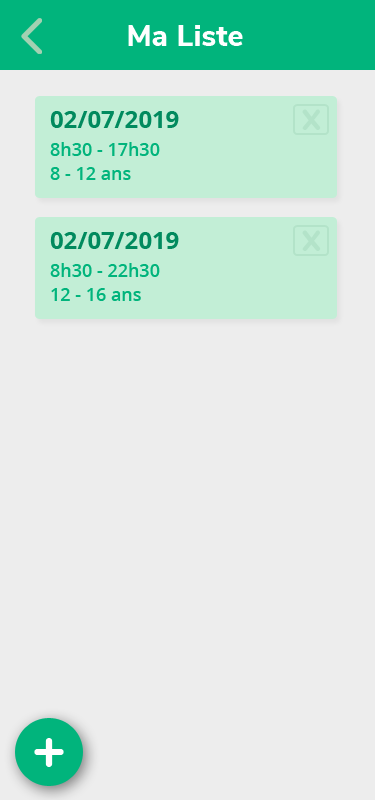
<style>
.page{position:relative;width:375px;height:800px;background:#ededed}
.page>*{position:absolute;margin:0}
.t1{font:30px "NunitoSans-ExtraBold";color:#ffffff}
.t2{font:24px "OpenSans-Bold";color:#018a5e}
.t3{font:37.6px "Quicksand-Bold";color:#b3e3c9}
.t4{font:18px "OpenSans-SemiBold";color:#01b47c}
.t5{font:60px "Nunito-ExtraBold";color:#ffffff}
</style>
<div class="page">
<p class="t1" style="left:128px;top:25px;width:115px;height:21px">Ma Liste</p>
<p class="t2" style="left:50px;top:111px;width:129px;height:17px">02/07/2019</p>
<p class="t3" style="left:302px;top:109px;width:19px;height:21px">x</p>
<p class="t4" style="left:50px;top:142px;width:110px;height:14px">8h30 - 17h30</p>
<p class="t4" style="left:50px;top:167px;width:81px;height:13px">8 - 12 ans</p>
<p class="t2" style="left:50px;top:232px;width:129px;height:17px">02/07/2019</p>
<p class="t3" style="left:302px;top:230px;width:19px;height:21px">x</p>
<p class="t4" style="left:50px;top:263px;width:110px;height:14px">8h30 - 22h30</p>
<p class="t4" style="left:51px;top:288px;width:90px;height:13px">12 - 16 ans</p>
<p class="t5" style="left:34px;top:738px;width:30px;height:29px">+</p>
</div>
